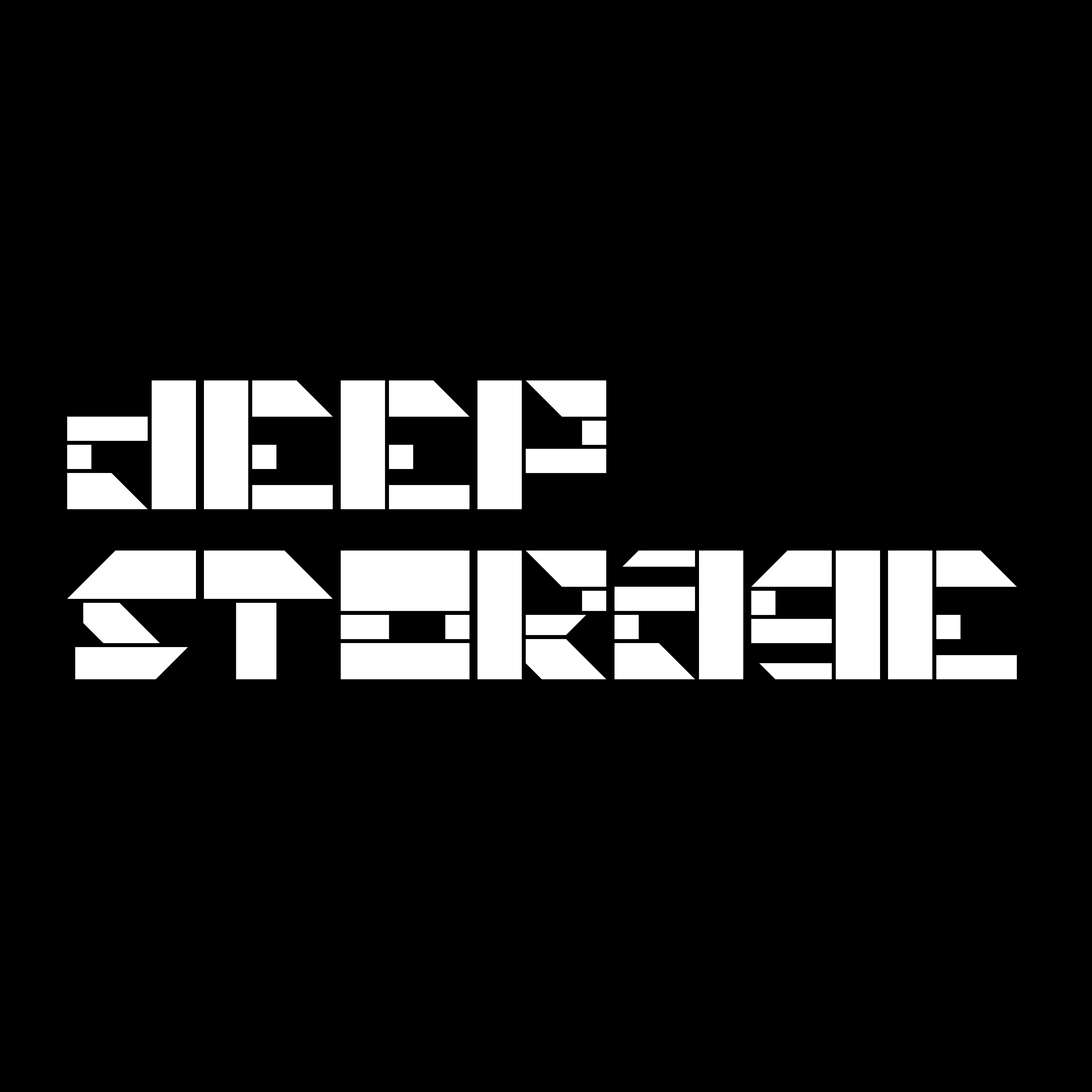
<style>
.page{position:relative;width:1092px;height:1092px;background:#000000}
.page>*{position:absolute;margin:0}
.t1{font:128.8px/170px "Universal-Union";color:#ffffff}
</style>
<div class="page">
<p class="t1" style="left:67px;top:380px;width:950px;height:299px">deep<br>storage</p>
</div>
